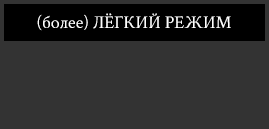
<style>
.page{position:relative;width:269px;height:129px;background:#333333}
.page>*{position:absolute;margin:0}
.t1{font:18px "CrimsonText-Regular";color:#ffffff}
</style>
<div class="page">
<p class="t1" style="left:37px;top:13px;width:194px;height:18px">(более) ЛЁГКИЙ РЕЖИМ</p>
</div>
